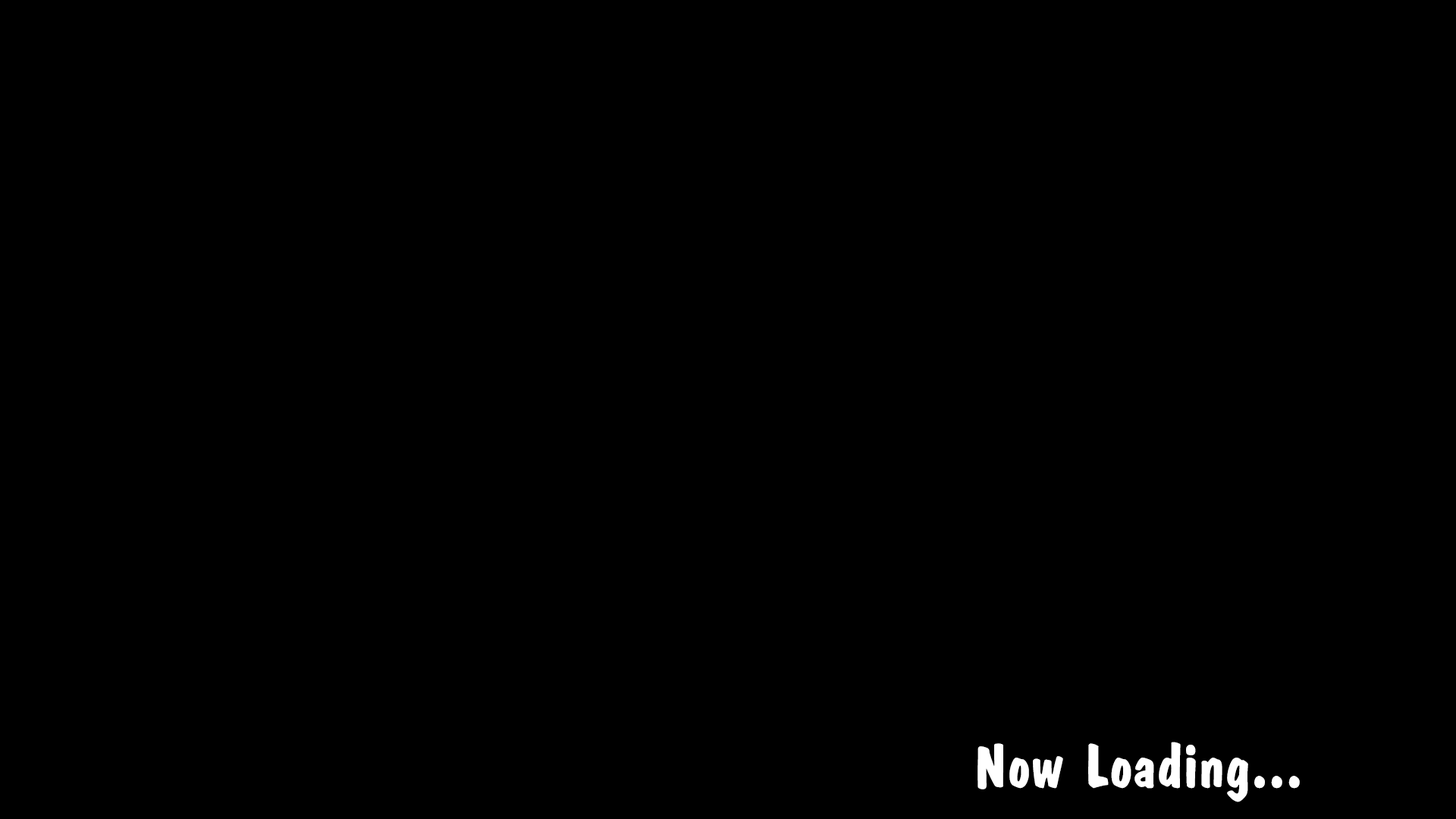
<style>
.page{position:relative;width:1456px;height:819px;background:#000000}
.page>*{position:absolute;margin:0}
.t1{font:62px "Eng-DFPKanteiryu-XB";color:#ffffff}
</style>
<div class="page">
<p class="t1" style="left:977px;top:742px;width:323px;height:60px">Now Loading...</p>
</div>
